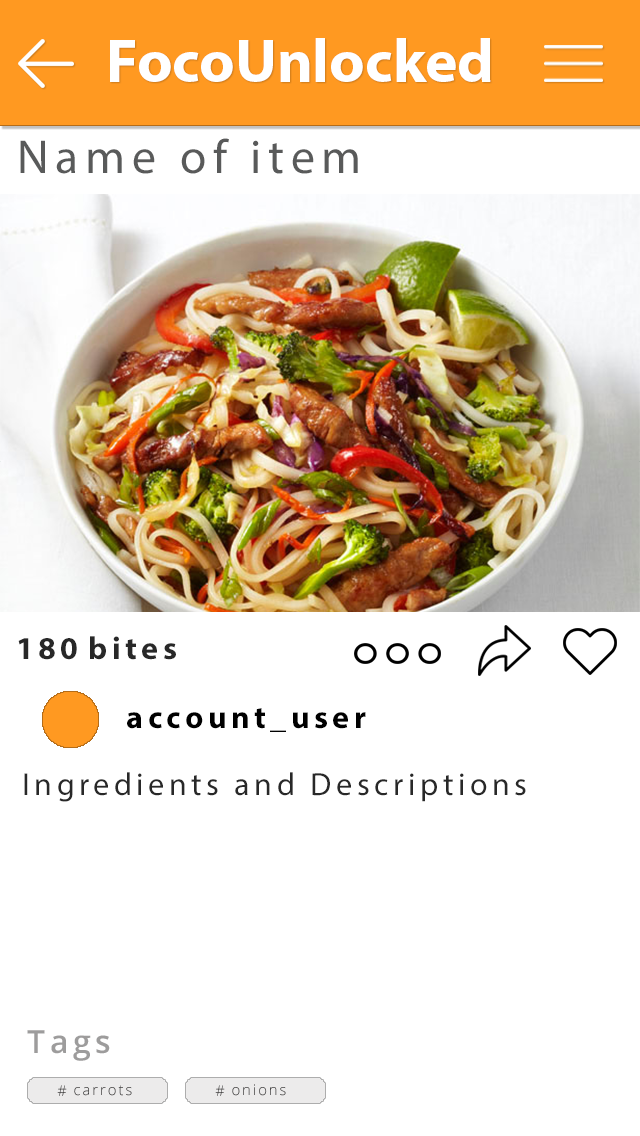
<style>
.page{position:relative;width:640px;height:1136px;background:#ffffff}
.page>*{position:absolute;margin:0}
.t1{font:61.3px "MyriadHebrew-Bold";color:#ffffff}
.t2{font:48px "MyriadPro-Regular";letter-spacing:0.14em;color:#595a5a}
.t3{font:32px "MyriadPro-Bold";letter-spacing:0.14em;color:#282828}
.t4{font:32px "MyriadHebrew-Bold";letter-spacing:0.14em;color:#000000}
.t5{font:32px "MyriadPro-Regular";letter-spacing:0.14em;color:#282828}
.t6{font:32px "OpenSans-Semibold";letter-spacing:0.14em;color:#9d9c9c}
.t7{font:14.7px "OpenSans-Light";letter-spacing:0.14em;color:#424141}
</style>
<div class="page">
<p class="t1" style="left:110px;top:38px;width:381px;height:44px">FocoUnlocked</p>
<p class="t2" style="left:20px;top:138px;width:338px;height:36px">Name of item</p>
<p class="t3" style="left:18px;top:638px;width:59px;height:22px">180</p>
<p class="t3" style="left:90px;top:636px;width:86px;height:24px">bites</p>
<p class="t4" style="left:127px;top:708px;width:239px;height:24px">account_user</p>
<p class="t5" style="left:24px;top:772px;width:502px;height:30px">Ingredients and Descriptions</p>
<p class="t6" style="left:27px;top:1030px;width:83px;height:31px">Tags</p>
<p class="t7" style="left:57px;top:1085px;width:10px;height:11px">#</p>
<p class="t7" style="left:74px;top:1085px;width:58px;height:11px">carrots</p>
<p class="t7" style="left:215px;top:1085px;width:10px;height:11px">#</p>
<p class="t7" style="left:232px;top:1084px;width:54px;height:12px">onions</p>
</div>
